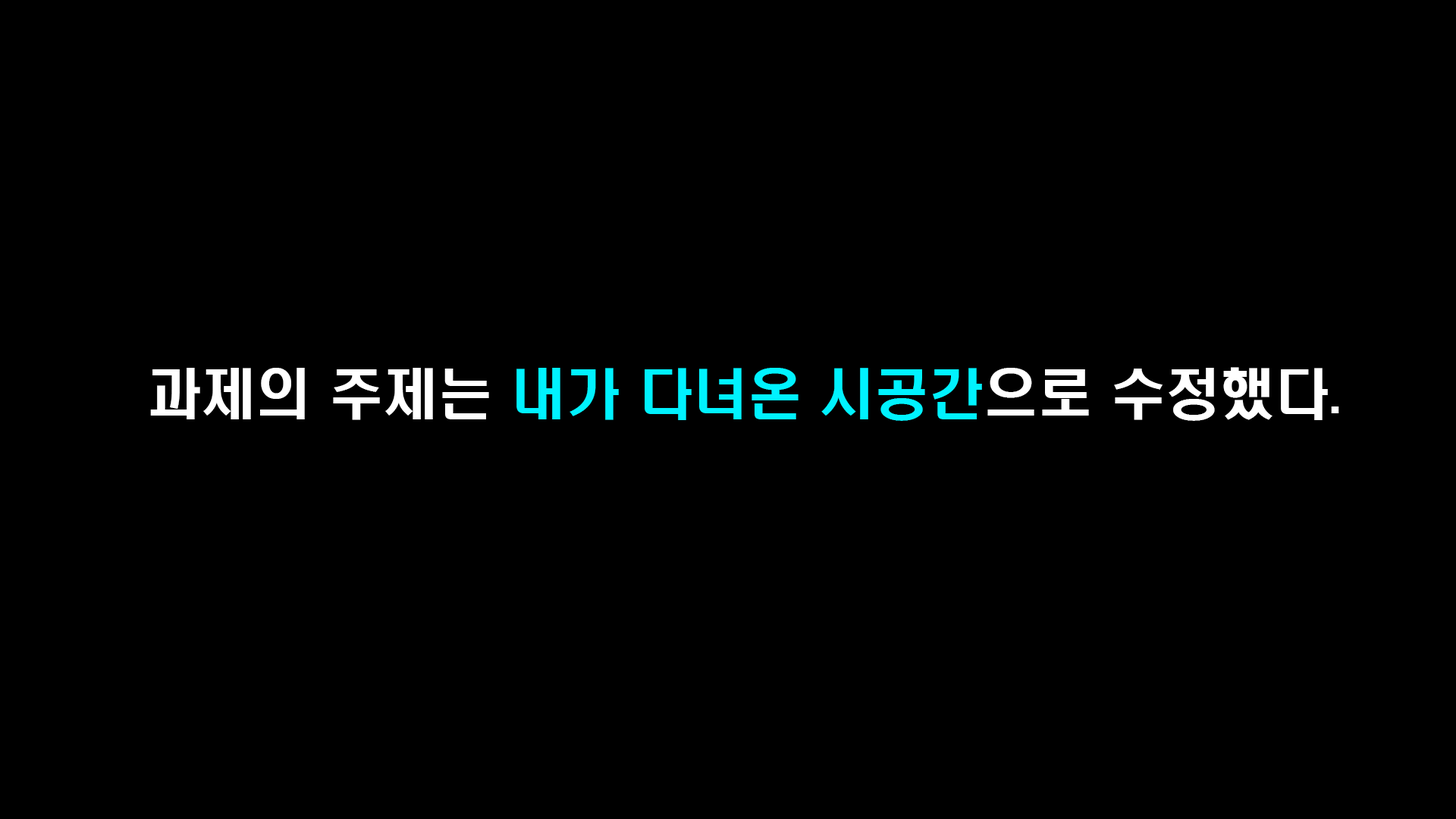
<style>
.page{position:relative;width:1456px;height:819px;background:#000000}
.page>*{position:absolute;margin:0}
.t1{font:54.6px "H2hdrM";color:#00f2ff}
.t2{font:54.6px "H2hdrM";color:#ffffff}
</style>
<div class="page">
<p class="t1" style="left:150px;top:367px;width:1189px;height:54px"><span class="t2"><br><br><br>과제의 주제는 </span>내가 다녀온 시공간<span class="t2">으로 수정했다.</span></p>
</div>
